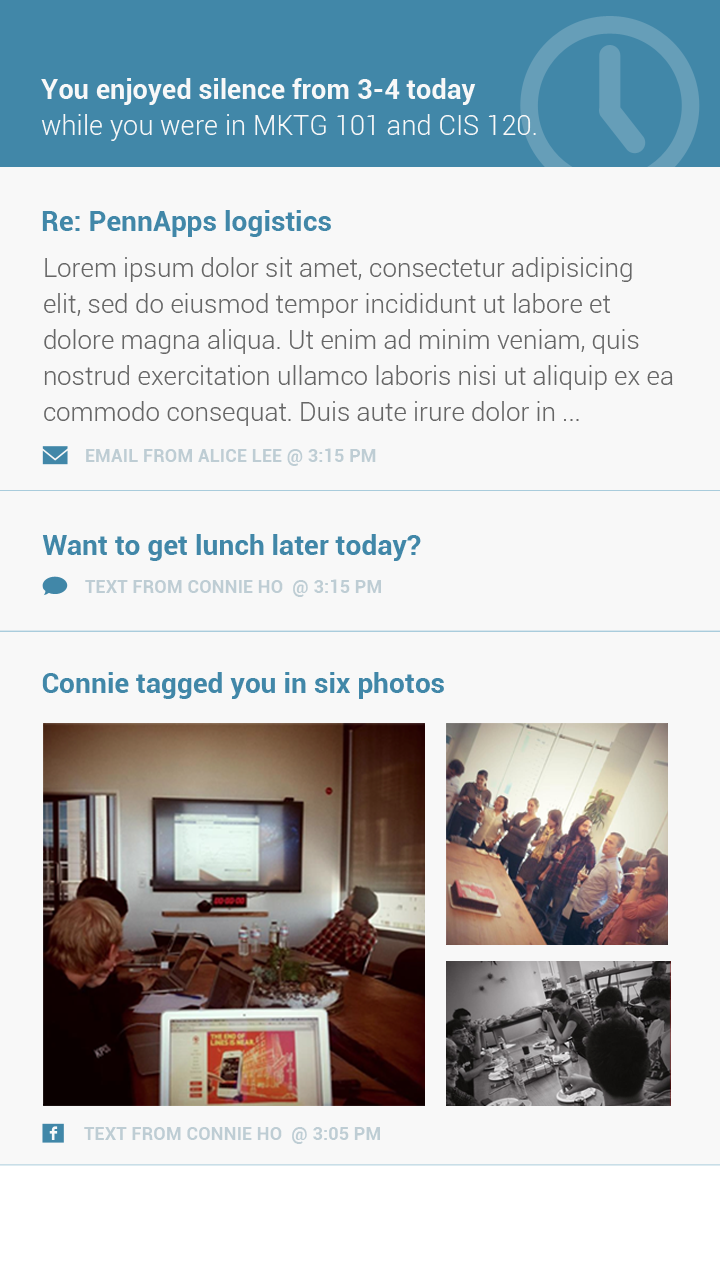
<style>
.page{position:relative;width:720px;height:1280px;background:#f8f8f8}
.page>*{position:absolute;margin:0}
.t1{font:27.3px "Roboto-Bold";color:#f8f8f8}
.t2{font:27.3px "Roboto-Light";color:#f8f8f8}
.t3{font:28.1px "Roboto-Bold";color:#4187a8}
.t4{font:26px/36px "Roboto-Light";color:#666666}
.t5{font:18.4px "Roboto-Bold";color:#becdd4}
</style>
<div class="page">
<p class="t1" style="left:41px;top:78px;width:435px;height:27px">You enjoyed silence from 3-4 today</p>
<p class="t2" style="left:41px;top:114px;width:495px;height:27px">while you were in MKTG 101 and CIS 120.</p>
<p class="t3" style="left:42px;top:210px;width:289px;height:27px">Re: PennApps logistics</p>
<p class="t4" style="left:44px;top:257px;width:629px;height:169px">Lorem ipsum dolor sit amet, consectetur adipisicing elit, sed do eiusmod tempor incididunt ut labore et dolore magna aliqua. Ut enim ad minim veniam, quis nostrud exercitation ullamco laboris nisi ut aliquip ex ea commodo consequat. Duis aute irure dolor in ... reprehenderit in voluptate velit esse cillum</p>
<p class="t5" style="left:86px;top:448px;width:290px;height:18px">EMAIL FROM ALICE LEE @ 3:15 PM</p>
<p class="t3" style="left:42px;top:534px;width:379px;height:27px">Want to get lunch later today?</p>
<p class="t5" style="left:85px;top:579px;width:296px;height:18px">TEXT FROM CONNIE HO  @ 3:15 PM</p>
<p class="t3" style="left:42px;top:672px;width:402px;height:27px">Connie tagged you in six photos</p>
<p class="t5" style="left:84px;top:1127px;width:296px;height:17px">TEXT FROM CONNIE HO  @ 3:05 PM</p>
</div>
